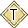
<style>
.page{position:relative;width:28px;height:28px;background:#ffffff}
.page>*{position:absolute;margin:0}
.t1{font:15.2px "LaoUI";color:#000000}
</style>
<div class="page">
<p class="t1" style="left:10px;top:9px;width:7px;height:11px">T</p>
</div>
